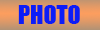
<style>
.page{position:relative;width:100px;height:30px;background:#0d1df8}
.page>*{position:absolute;margin:0}
.t1{font:24px "Impact";color:#0d1df8}
</style>
<div class="page">
<p class="t1" style="left:18px;top:5px;width:62px;height:19px">PHOTO</p>
</div>
